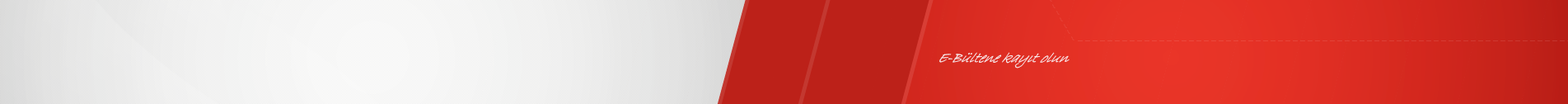
<style>
.page{position:relative;width:1568px;height:104px}
.page>*{position:absolute;margin:0}
.t1{font:18.1px "BradleyHandITC";color:#fbebeb;scale:0.8 1}
</style>
<div class="page">
<p class="t1" style="left:939px;top:52px;width:131px;height:16px">E-Bültene kayıt olun</p>
</div>
